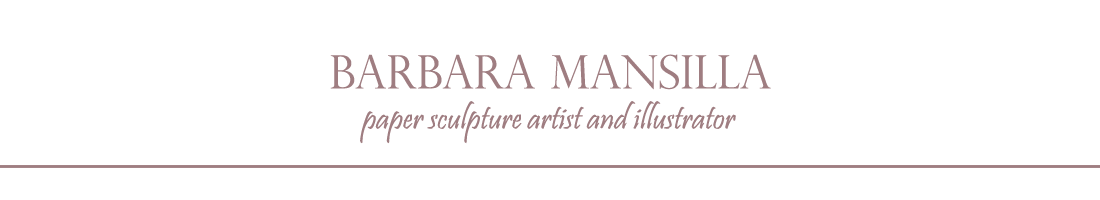
<style>
.page{position:relative;width:1100px;height:200px;background:#ffffff}
.page>*{position:absolute;margin:0}
.t1{font:33.3px "Pristina-Regular";color:#9f7d81}
.t2{font:37.5px "Pristina-Regular";color:#9f7d81}
.t3{font:45.8px "PerpetuaTitlingMT-Light";color:#9f7d81}
</style>
<div class="page">
<p class="t1" style="left:330px;top:54px;width:441px;height:90px;text-align:center"><span class="t2">        </span><span class="t3">barbara mansilla    <br></span>paper sculpture artist and illustrator</p>
</div>
